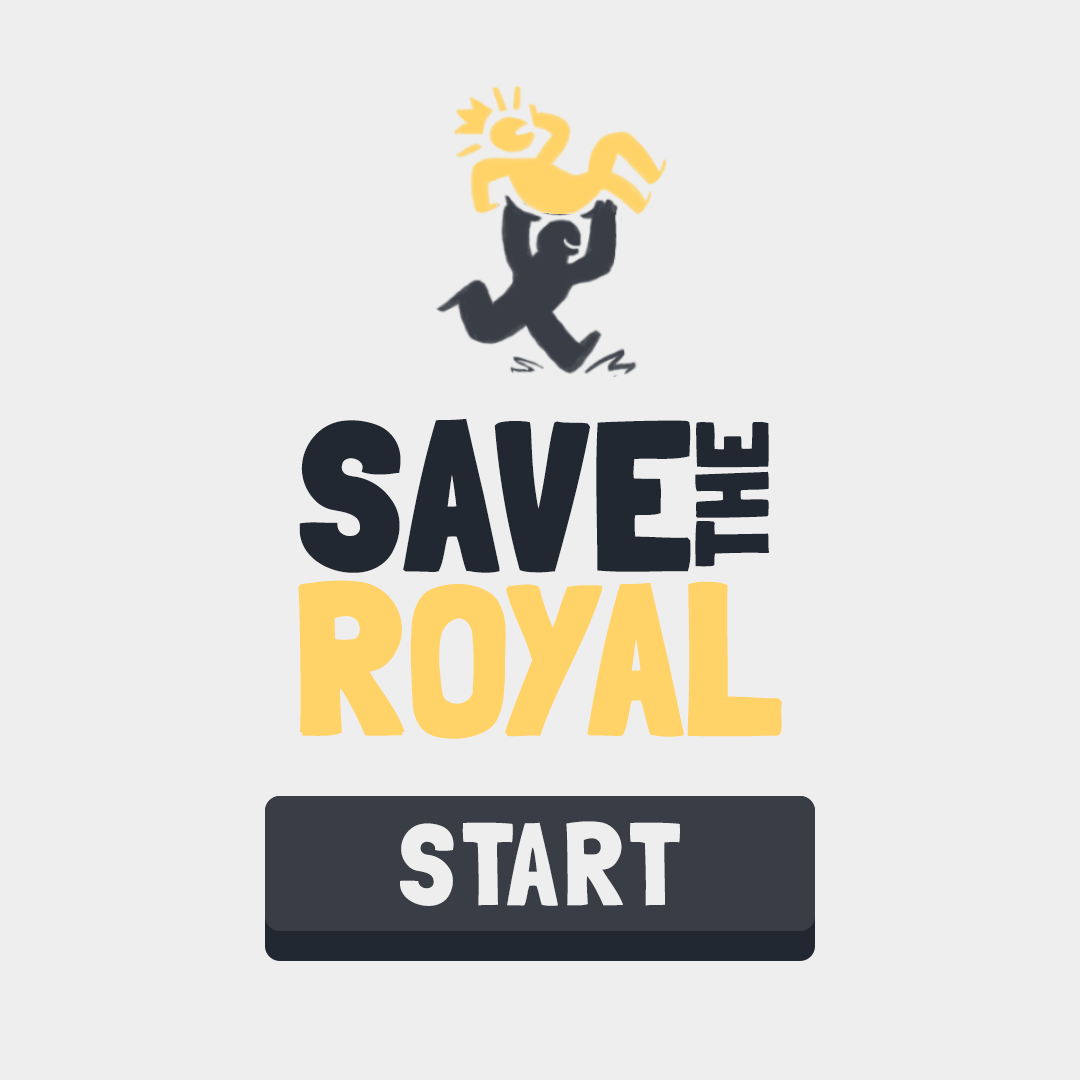
<style>
.page{position:relative;width:1080px;height:1080px;background:#eeeeee}
.page>*{position:absolute;margin:0}
.t1{font:208.3px "LondrinaSolid-Regular";color:#222831;font-weight:bold}
.t2{font:100px "LondrinaSolid-Regular";color:#222831;font-weight:bold}
.t3{font:208.3px "LondrinaSolid-Regular";letter-spacing:-0.01em;color:#ffd368;font-weight:bold}
.t4{font:116.7px "LondrinaSolid-Regular";letter-spacing:0.03em;color:#eeeeee}
</style>
<div class="page">
<p class="t1" style="left:299px;top:418px;width:392px;height:155px">SAVE</p>
<p class="t2" style="left:695px;top:422px;width:75px;height:145px;rotate:-90deg">THE</p>
<p class="t3" style="left:298px;top:580px;width:484px;height:159px">ROYAL</p>
<p class="t4" style="left:400px;top:821px;width:280px;height:85px">START</p>
</div>
